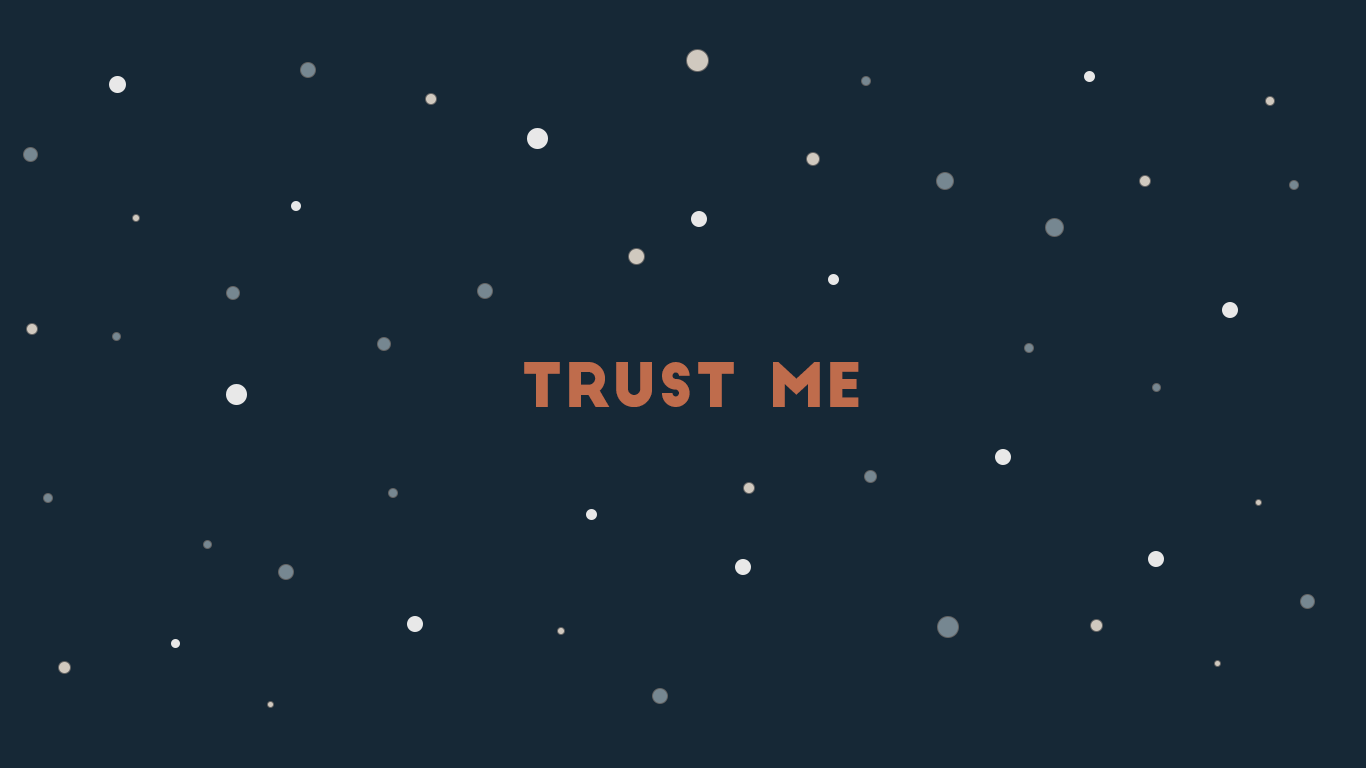
<style>
.page{position:relative;width:1366px;height:768px;background:#162836}
.page>*{position:absolute;margin:0}
.t1{font:60px "BigJohn";letter-spacing:0.025em;color:#bf6c4c}
</style>
<div class="page">
<p class="t1" style="left:524px;top:362px;width:335px;height:45px">TRUST ME</p>
</div>
